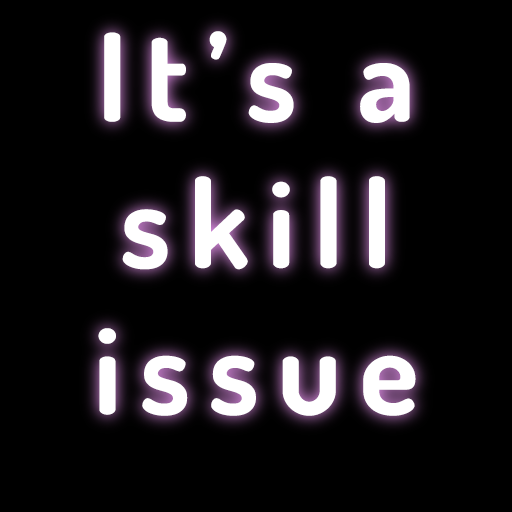
<style>
.page{position:relative;width:512px;height:512px;background:#000000}
.page>*{position:absolute;margin:0}
.t1{font:122px "Dosis-Bold";letter-spacing:0.15em;color:#ffffff}
</style>
<div class="page">
<p class="t1" style="left:98px;top:31px;width:318px;height:385px;text-align:center">It’s a skill issue</p>
</div>
